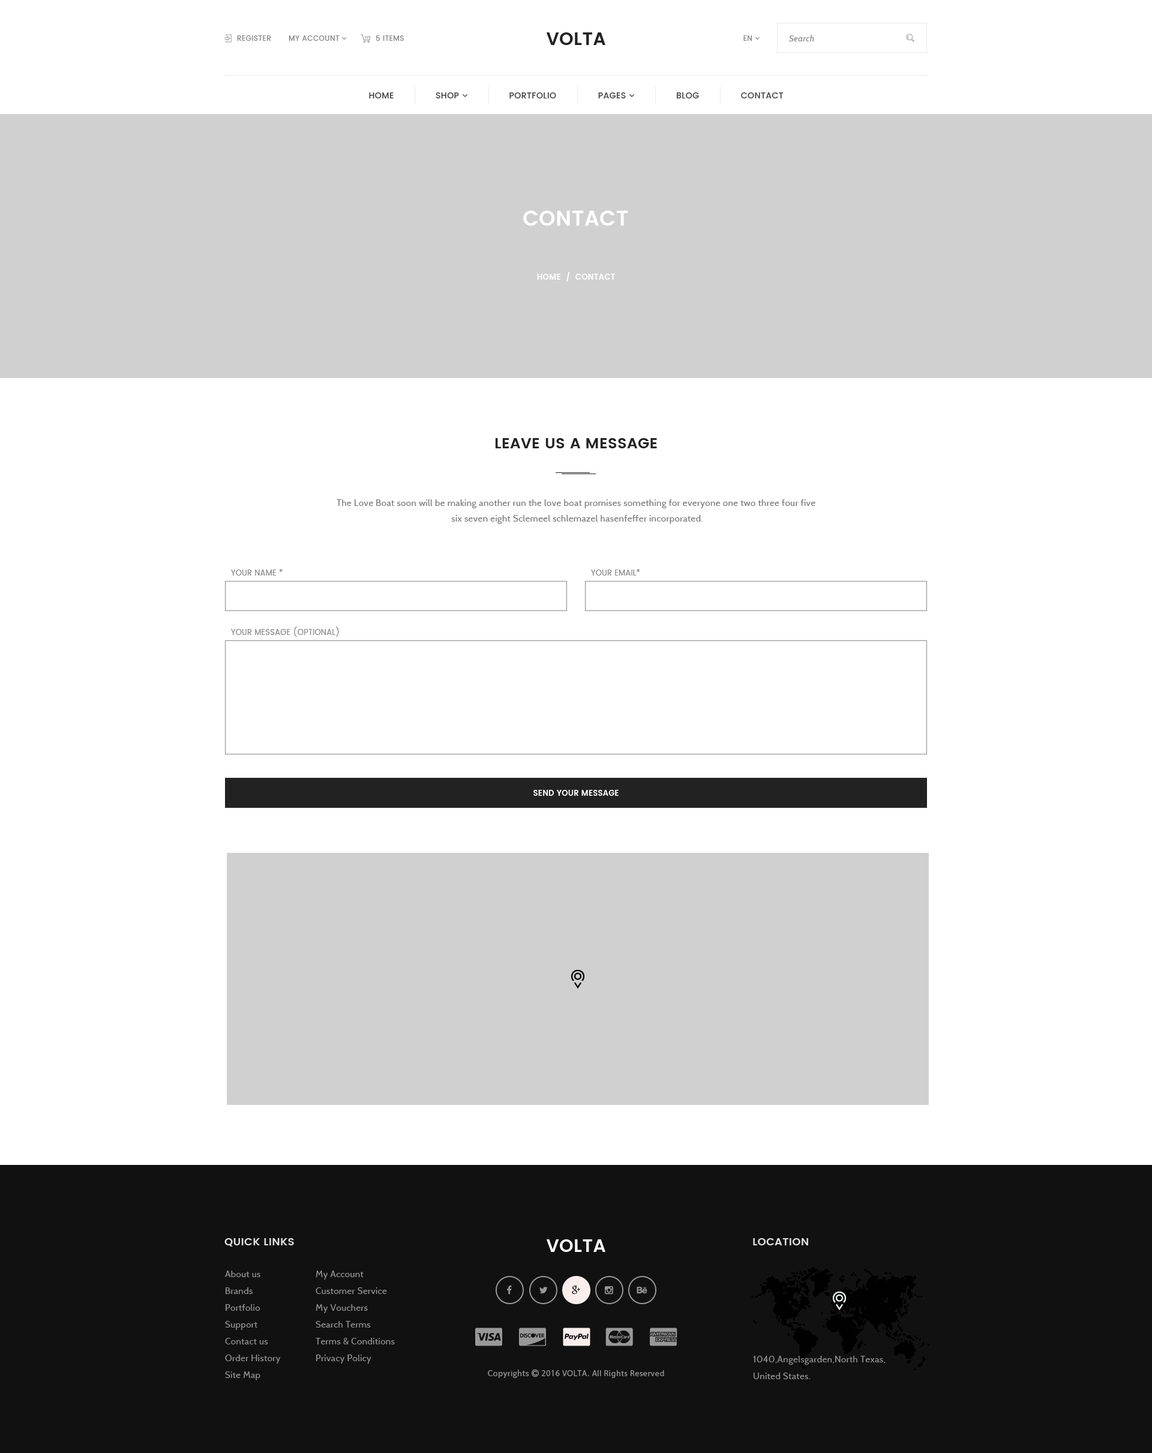
<style>
.page{position:relative;width:1152px;height:1453px;background:#ffffff}
.page>*{position:absolute;margin:0}
.t1{font:7.2px "Poppins-Medium";letter-spacing:0.03em;color:#888888}
.t2{font:18px "Poppins-SemiBold";letter-spacing:0.015em;color:#222222}
.t3{font:8.4px "Cabin-Italic";letter-spacing:0.04em;color:#888888}
.t4{font:21px "Poppins-SemiBold";letter-spacing:0.015em;color:#ffffff}
.t5{font:7.8px "Poppins-SemiBold";letter-spacing:0.03em;color:#ffffff}
.t6{font:15px "Poppins-SemiBold";letter-spacing:0.015em;color:#222222;text-transform:uppercase}
.t7{font:9px/15.6px "Cabin-Regular";letter-spacing:0.03em;color:#777777}
.t8{font:7.8px "Poppins-Regular";letter-spacing:0.015em;color:#888888;text-transform:uppercase}
.t9{font:7.8px "Poppins-SemiBold";letter-spacing:0.015em;color:#ffffff}
.t10{font:10.8px "Poppins-SemiBold";letter-spacing:0.015em;color:#e1e1e1}
.t11{font:18px "Poppins-SemiBold";letter-spacing:0.015em;color:#ffffff}
.t12{font:9px/16.8px "Cabin-Regular";letter-spacing:0.03em;color:#989898}
</style>
<div class="page">
<p class="t1" style="left:237px;top:35px;width:34px;height:6px">REGISTER</p>
<p class="t1" style="left:376px;top:35px;width:28px;height:6px">5 ITEMS</p>
<p class="t2" style="left:546px;top:32px;width:59px;height:13px">VOLTA</p>
<p class="t3" style="left:789px;top:35px;width:25px;height:6px">Search</p>
<p class="t4" style="left:523px;top:211px;width:105px;height:15px">CONTACT</p>
<p class="t5" style="left:537px;top:272px;width:78px;height:9px">HOME  /  CONTACT</p>
<p class="t6" style="left:495px;top:438px;width:162px;height:10px">LEAVE US A MESSAGE</p>
<p class="t7" style="left:337px;top:499px;width:478px;height:25px;text-align:center">The Love Boat soon will be making another run the love boat promises something for everyone one two three four five<br> six seven eight Sclemeel schlemazel hasenfeffer incorporated.</p>
<p class="t8" style="left:231px;top:569px;width:52px;height:6px">Your Name *</p>
<p class="t8" style="left:591px;top:569px;width:49px;height:6px">Your EMAIL*</p>
<p class="t8" style="left:231px;top:626px;width:108px;height:11px">YOUR MESSAGE (OPTIONAL)</p>
<p class="t9" style="left:533px;top:790px;width:86px;height:6px">SEND YOUR MESSAGE</p>
<p class="t10" style="left:224px;top:1238px;width:70px;height:8px">QUICK LINKS</p>
<p class="t11" style="left:546px;top:1239px;width:59px;height:13px">VOLTA</p>
<p class="t10" style="left:753px;top:1238px;width:55px;height:7px">LOCATION</p>
<p class="t12" style="left:225px;top:1270px;width:56px;height:110px">About us<br>Brands<br>Portfolio<br>Support<br>Contact us<br>Order History<br>Site Map</p>
<p class="t12" style="left:316px;top:1270px;width:79px;height:93px">My Account<br>Customer Service<br>My Vouchers<br>Search Terms<br>Terms &amp; Conditions<br>Privacy Policy</p>
<p class="t12" style="left:753px;top:1355px;width:132px;height:24px">1040,Angelsgarden,North Texas,<br>United States.</p>
</div>
